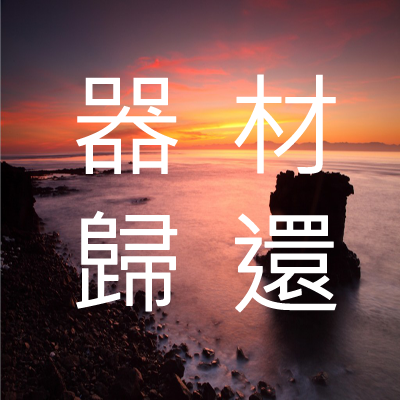
<style>
.page{position:relative;width:400px;height:400px}
.page>*{position:absolute;margin:0}
.t1{font:112.1px/68.8px "MicrosoftJhengHeiRegular";letter-spacing:0.04em;color:#ffffff;font-weight:bold}
</style>
<div class="page">
<p class="t1" style="left:76px;top:74px;width:261px;height:239px;text-align:center">器 材<br><br>歸 還</p>
</div>
